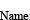
<style>
.page{position:relative;width:30px;height:20px;background:#ffffff}
.page>*{position:absolute;margin:0}
.t1{font:12px "TimesNewRomanPSMT";color:#000000}
</style>
<div class="page">
<p class="t1" style="left:0px;top:11px;width:32px;height:9px">Name:</p>
</div>
